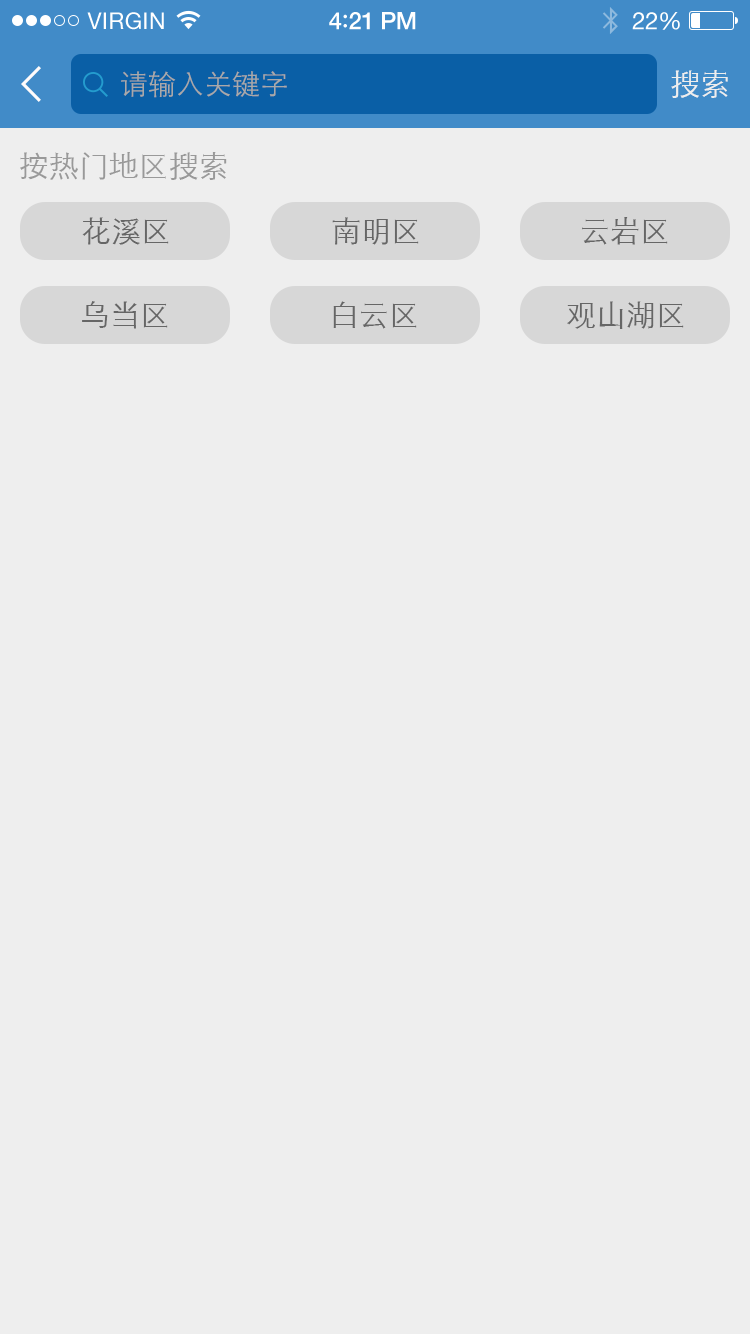
<style>
.page{position:relative;width:750px;height:1334px;background:#eeeeee}
.page>*{position:absolute;margin:0}
.t1{font:23px "HelveticaNeue";letter-spacing:0.02em;color:#ffffff}
.t2{font:24px "HelveticaNeue-Medium";letter-spacing:-0.02em;color:#ffffff}
.t3{font:26px "Avenir-Medium";letter-spacing:-0.02em;color:#ffffff}
.t4{font:24px "HelveticaNeue";letter-spacing:-0.02em;color:#ffffff}
.t5{font:28px "STXihei";color:#a9a9a9}
.t6{font:30px "STXihei";color:#eeeeee}
.t7{font:30px "STXihei";color:#999999}
.t8{font:30px "STXihei";color:#666666}
</style>
<div class="page">
<p class="t1" style="left:87px;top:12px;width:77px;height:18px">VIRGIN</p>
<p class="t2" style="left:329px;top:12px;width:87px;height:18px">4<span class="t3">:</span>21 PM</p>
<p class="t4" style="left:632px;top:12px;width:48px;height:18px">22%</p>
<p class="t5" style="left:121px;top:71px;width:166px;height:27px">请输入关键字</p>
<p class="t6" style="left:671px;top:70px;width:57px;height:28px">搜索</p>
<p class="t7" style="left:20px;top:152px;width:207px;height:28px">按热门地区搜索</p>
<p class="t8" style="left:82px;top:217px;width:87px;height:28px">花溪区</p>
<p class="t8" style="left:332px;top:217px;width:87px;height:28px">南明区</p>
<p class="t8" style="left:582px;top:217px;width:86px;height:28px">云岩区</p>
<p class="t8" style="left:82px;top:301px;width:86px;height:28px">乌当区</p>
<p class="t8" style="left:333px;top:301px;width:84px;height:28px">白云区</p>
<p class="t8" style="left:567px;top:301px;width:117px;height:28px">观山湖区</p>
</div>
